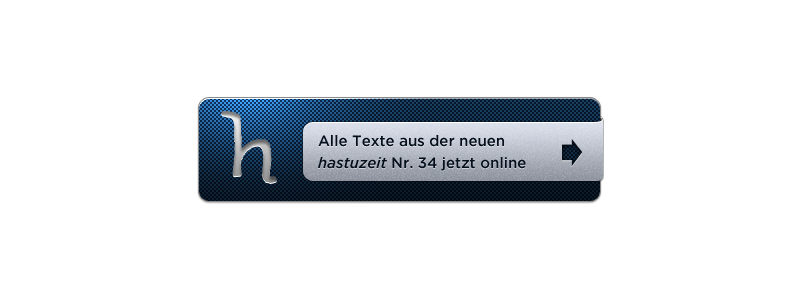
<style>
.page{position:relative;width:800px;height:300px;background:#ffffff}
.page>*{position:absolute;margin:0}
.t1{font:15px/12px "GothamHTF-Medium";color:#040f1d}
.t2{font:15px/12px "GothamHTF-MediumItalic";color:#040f1d}
</style>
<div class="page">
<p class="t1" style="left:318px;top:135px;width:208px;height:36px">Alle Texte aus der neuen<br><span class="t2">hastuzeit </span>Nr. 34 jetzt online</p>
</div>
